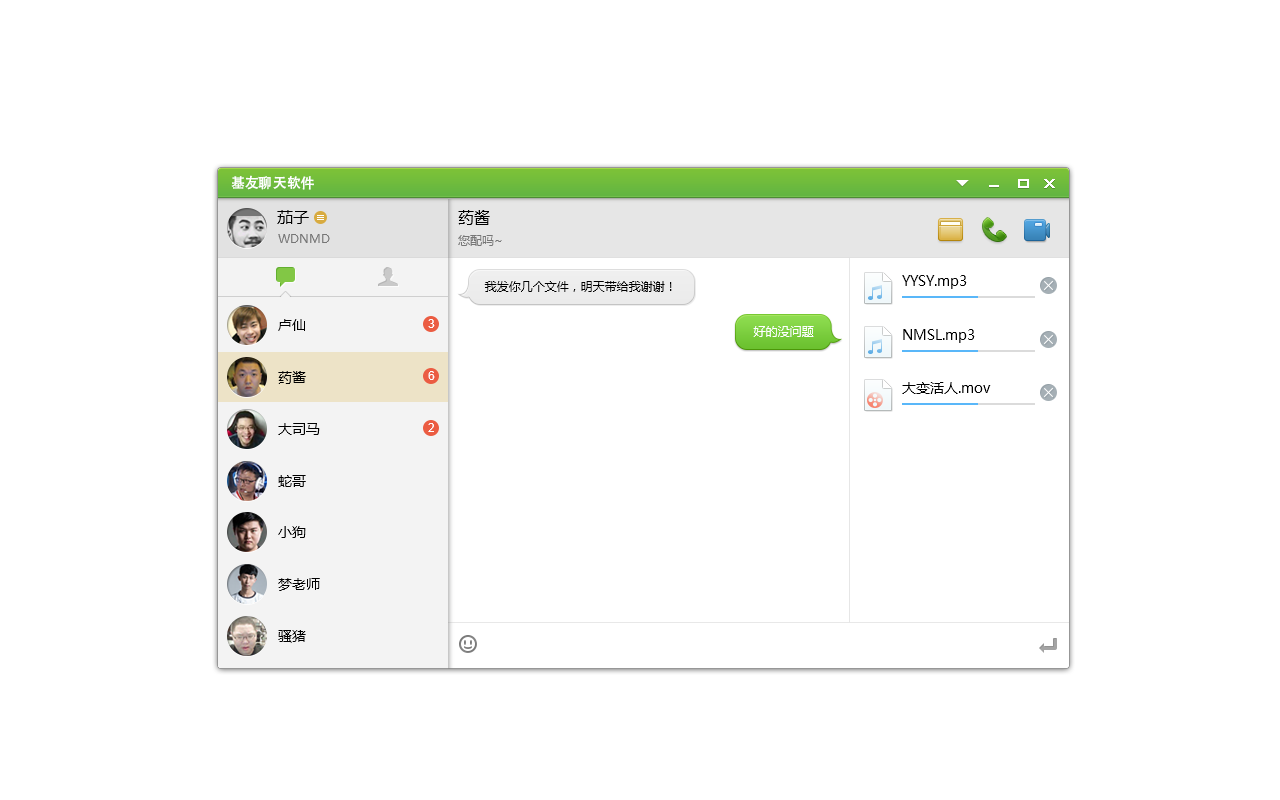
<style>
.page{position:relative;width:1280px;height:800px;background:#ffffff}
.page>*{position:absolute;margin:0}
.t1{font:14px "AdobeHeitiStd-Regular";color:#ffffff}
.t2{font:16px "MicrosoftYaHei";color:#000000}
.t3{font:12px "MicrosoftYaHei";color:#767676}
.t4{font:12px "MicrosoftYaHei";color:#000000}
.t5{font:14px "MicrosoftYaHei";color:#000000}
.t6{font:12px "ArialMT";color:#ffffff}
.t7{font:12px "MicrosoftYaHei";color:#ffffff}
</style>
<div class="page">
<p class="t1" style="left:231px;top:175px;width:83px;height:15px">基友聊天软件</p>
<p class="t2" style="left:277px;top:210px;width:32px;height:14px">茄子</p>
<p class="t2" style="left:458px;top:210px;width:32px;height:15px">药酱</p>
<p class="t3" style="left:278px;top:234px;width:52px;height:9px">WDNMD</p>
<p class="t3" style="left:458px;top:235px;width:44px;height:11px">您配吗~</p>
<p class="t4" style="left:484px;top:281px;width:188px;height:11px">我发你几个文件，明天带给我谢谢！</p>
<p class="t5" style="left:902px;top:275px;width:65px;height:14px">YYSY.mp3</p>
<p class="t5" style="left:278px;top:319px;width:27px;height:12px">卢仙</p>
<p class="t6" style="left:428px;top:319px;width:7px;height:9px">3</p>
<p class="t7" style="left:753px;top:326px;width:61px;height:11px">好的没问题</p>
<p class="t5" style="left:903px;top:329px;width:72px;height:14px">NMSL.mp3</p>
<p class="t5" style="left:278px;top:371px;width:28px;height:13px">药酱</p>
<p class="t6" style="left:428px;top:371px;width:7px;height:9px">6</p>
<p class="t5" style="left:902px;top:382px;width:89px;height:12px">大变活人.mov</p>
<p class="t5" style="left:278px;top:423px;width:42px;height:12px">大司马</p>
<p class="t6" style="left:428px;top:423px;width:6px;height:9px">2</p>
<p class="t5" style="left:278px;top:475px;width:28px;height:12px">蛇哥</p>
<p class="t5" style="left:278px;top:526px;width:28px;height:12px">小狗</p>
<p class="t5" style="left:278px;top:578px;width:42px;height:13px">梦老师</p>
<p class="t5" style="left:278px;top:630px;width:28px;height:13px">骚猪</p>
</div>
